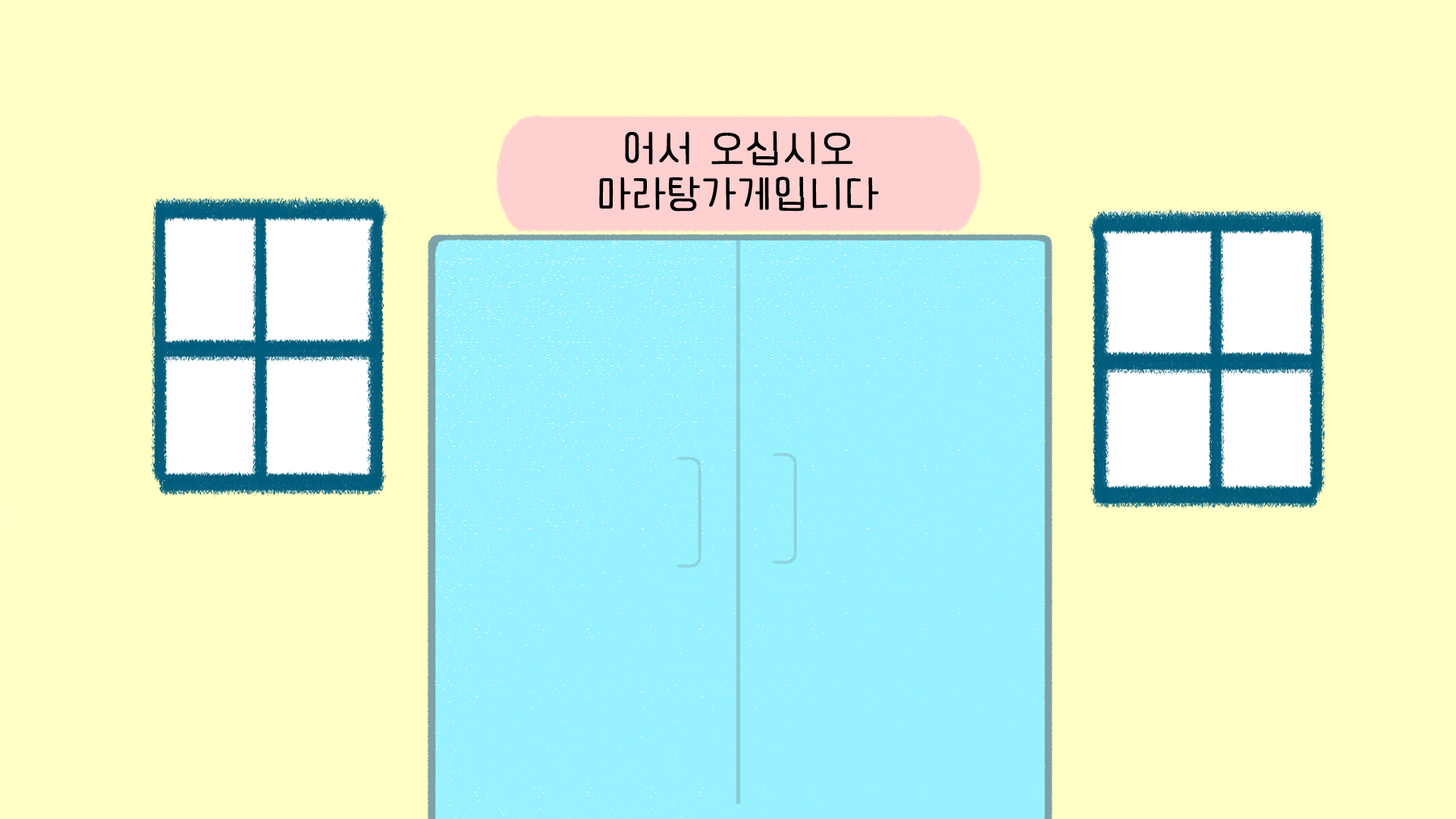
<style>
.page{position:relative;width:1456px;height:819px;background:#ffffc6}
.page>*{position:absolute;margin:0}
.t1{font:37.9px "EF_Diary";color:#000000;font-weight:bold}
</style>
<div class="page">
<p class="t1" style="left:599px;top:131px;width:280px;height:81px;text-align:center">어서 오십시오<br>마라탕가게입니다</p>
</div>
